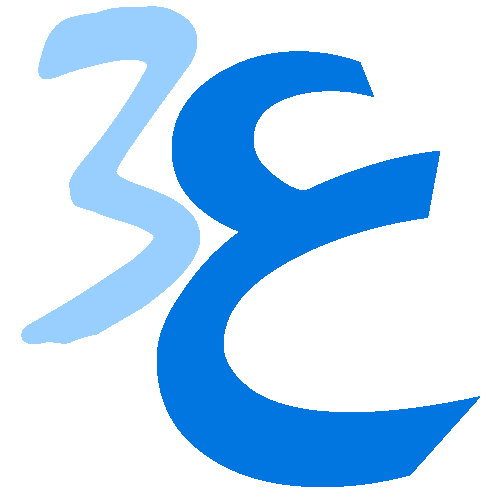
<style>
.page{position:relative;width:500px;height:500px;background:#ffffff}
.page>*{position:absolute;margin:0}
.t1{font:475.7px "Mistral";letter-spacing:0.01em;color:#99cfff}
.t2{font:642.8px "Aljazeera";letter-spacing:0.01em;color:#0176e0}
</style>
<div class="page">
<p class="t1" style="left:21px;top:6px;width:179px;height:338px">3</p>
<p class="t2" style="left:157px;top:51px;width:323px;height:436px">ع</p>
</div>
